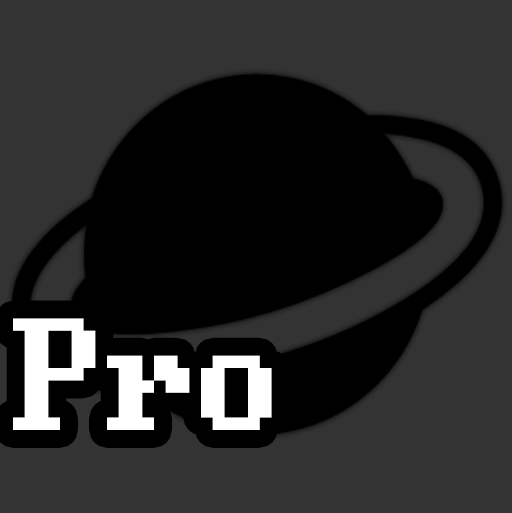
<style>
.page{position:relative;width:512px;height:513px;background:#333333}
.page>*{position:absolute;margin:0}
.t1{font:198.3px "Terminal";color:#ffffff;scale:0.76 1}
</style>
<div class="page">
<p class="t1" style="left:13px;top:318px;width:259px;height:112px">Pro</p>
</div>
